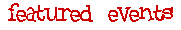
<style>
.page{position:relative;width:181px;height:30px;background:#ffffff}
.page>*{position:absolute;margin:0}
.t1{font:30px "Blackboysonmopeds";color:#cc0000}
</style>
<div class="page">
<p class="t1" style="left:8px;top:3px;width:165px;height:19px">featured events</p>
</div>
